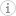
<style>
.page{position:relative;width:16px;height:16px;background:#fcfcfc}
.page>*{position:absolute;margin:0}
.t1{font:14px "BookmanOldStyle";color:#868686}
</style>
<div class="page">
<p class="t1" style="left:6px;top:3px;width:4px;height:10px">i</p>
</div>
